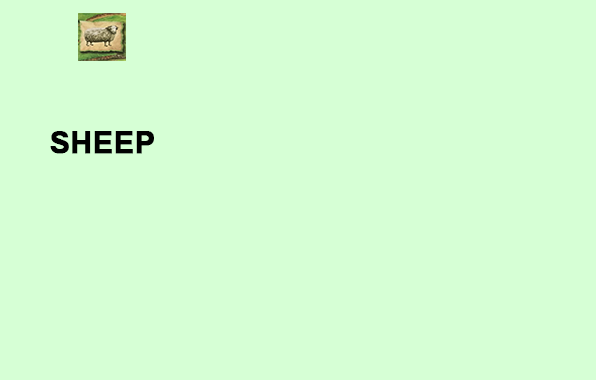
<style>
.page{position:relative;width:596px;height:380px;background:#d6ffd5}
.page>*{position:absolute;margin:0}
.t1{font:30px "Arial-BoldMT";color:#000101;font-weight:bold}
</style>
<div class="page">
<p class="t1" style="left:50px;top:131px;width:104px;height:23px">SHEEP</p>
</div>
